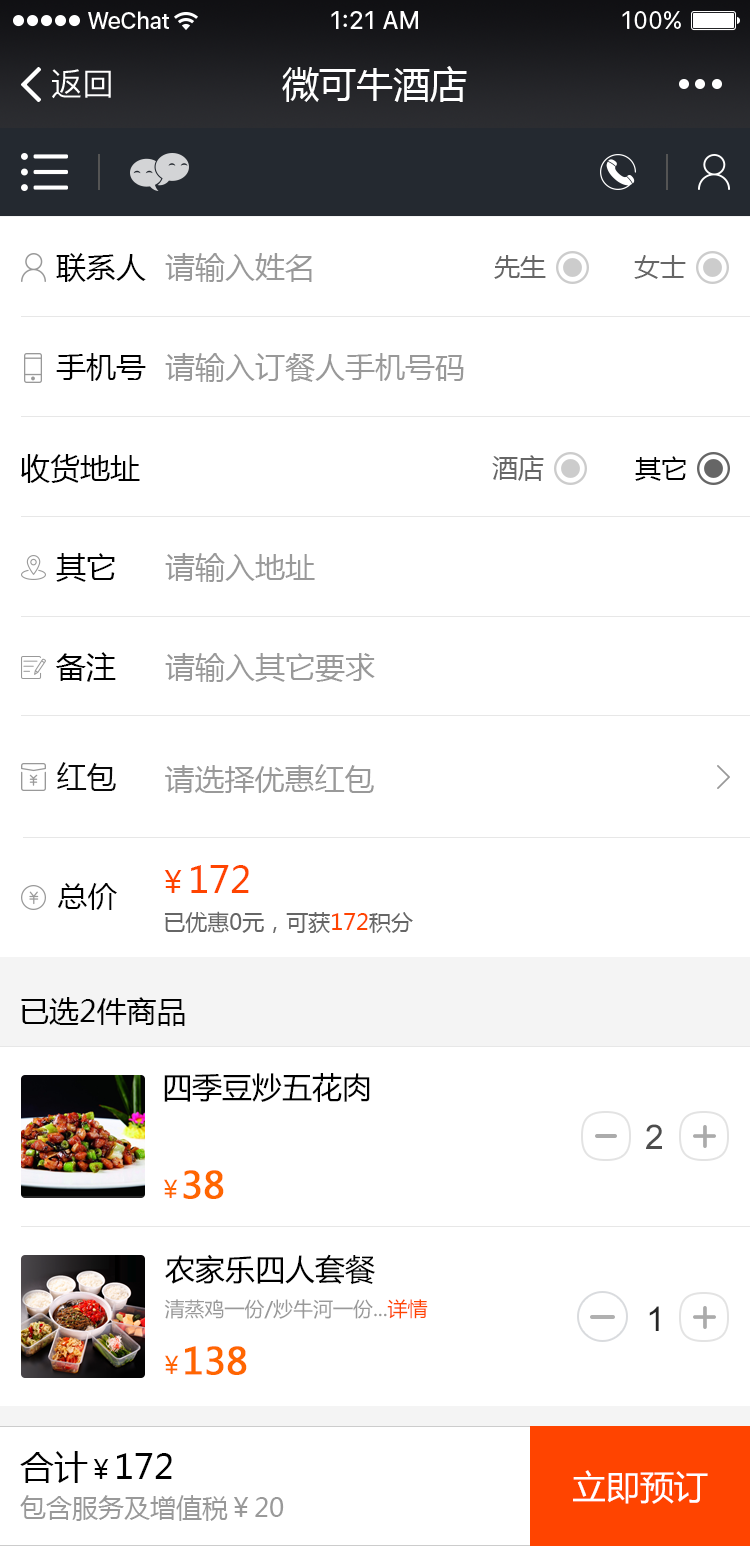
<style>
.page{position:relative;width:750px;height:1546px;background:#ffffff}
.page>*{position:absolute;margin:0}
.t1{font:32px "PingFangSC-Regular";color:#ffffff}
.t2{font:37px "MicrosoftYaHei";color:#ffffff}
.t3{font:30px "MicrosoftYaHei";color:#000000}
.t4{font:30px "MicrosoftYaHei";color:#999999}
.t5{font:26px "MicrosoftYaHei";color:#666666}
.t6{font:26px "MicrosoftYaHei";color:#000000}
.t7{font:30px "MicrosoftYaHei";color:#0a0a0a}
.t8{font:36px "MicrosoftYaHei";color:#ff4400}
.t9{font:30px "MicrosoftYaHei";color:#ff4400}
.t10{font:22px "MicrosoftYaHei";color:#666666}
.t11{font:30px "MicrosoftYaHei";color:#ff6600}
.t12{font:22px "MicrosoftYaHei";color:#ff4400}
.t13{font:34px "ArialMT";color:#4d4d4d}
.t14{font:24px "MicrosoftYaHei";color:#ff6600}
.t15{font:36px "MicrosoftYaHei";color:#ff6600;font-weight:bold}
.t16{font:20px "MicrosoftYaHei";color:#999999}
.t17{font:20px "MicrosoftYaHei";color:#ff4400}
.t18{font:34px "ArialMT";color:#262626}
.t19{font:26px/45px "MicrosoftYaHei";color:#999999}
.t20{font:34px/45px "MicrosoftYaHei";color:#000000}
.t21{font:26px/45px "MicrosoftYaHei";color:#000000}
.t22{font:34px "MicrosoftYaHei";color:#ffffff}
</style>
<div class="page">
<p class="t1" style="left:52px;top:69px;width:59px;height:30px">返回</p>
<p class="t2" style="left:282px;top:66px;width:185px;height:36px">微可牛酒店</p>
<p class="t3" style="left:56px;top:253px;width:90px;height:29px">联系人</p>
<p class="t4" style="left:165px;top:253px;width:147px;height:29px">请输入姓名</p>
<p class="t5" style="left:494px;top:255px;width:52px;height:24px">先生</p>
<p class="t5" style="left:634px;top:255px;width:52px;height:24px">女士</p>
<p class="t3" style="left:56px;top:353px;width:90px;height:28px">手机号</p>
<p class="t4" style="left:165px;top:353px;width:299px;height:29px">请输入订餐人手机号码</p>
<p class="t3" style="left:21px;top:454px;width:119px;height:29px">收货地址</p>
<p class="t5" style="left:492px;top:455px;width:52px;height:26px">酒店</p>
<p class="t6" style="left:635px;top:456px;width:51px;height:25px">其它</p>
<p class="t3" style="left:56px;top:553px;width:59px;height:29px">其它</p>
<p class="t4" style="left:165px;top:553px;width:150px;height:29px">请输入地址</p>
<p class="t3" style="left:56px;top:652px;width:60px;height:30px">备注</p>
<p class="t4" style="left:165px;top:653px;width:210px;height:29px">请输入其它要求</p>
<p class="t7" style="left:57px;top:762px;width:59px;height:29px">红包</p>
<p class="t4" style="left:165px;top:764px;width:209px;height:29px">请选择优惠红包</p>
<p class="t8" style="left:164px;top:865px;width:85px;height:28px"><span class="t9">￥</span>172</p>
<p class="t3" style="left:58px;top:883px;width:59px;height:27px">总价</p>
<p class="t10" style="left:164px;top:911px;width:249px;height:22px"><span class="t11"><br></span>已优惠0元，可获<span class="t12">172</span>积分</p>
<p class="t3" style="left:21px;top:997px;width:164px;height:29px">已选2件商品</p>
<p class="t3" style="left:164px;top:1073px;width:206px;height:29px">四季豆炒五花肉</p>
<p class="t13" style="left:646px;top:1124px;width:16px;height:25px">2</p>
<p class="t14" style="left:164px;top:1179px;width:14px;height:19px">￥</p>
<p class="t15" style="left:183px;top:1170px;width:41px;height:29px">38</p>
<p class="t3" style="left:165px;top:1254px;width:210px;height:31px">农家乐四人套餐</p>
<p class="t16" style="left:164px;top:1299px;width:264px;height:20px">清蒸鸡一份/炒牛河一份...<span class="t17">详情</span></p>
<p class="t18" style="left:649px;top:1306px;width:10px;height:25px">1</p>
<p class="t15" style="left:185px;top:1346px;width:62px;height:29px">138</p>
<p class="t14" style="left:165px;top:1355px;width:14px;height:19px">￥</p>
<p class="t19" style="left:20px;top:1451px;width:264px;height:70px"><span class="t20">合计</span><span class="t21">￥</span><span class="t20">172<br></span>包含服务及增值税￥20</p>
<p class="t22" style="left:573px;top:1470px;width:135px;height:34px">立即预订</p>
</div>
